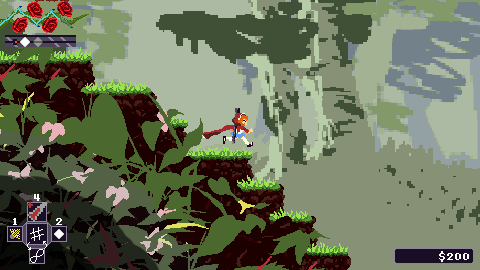
<style>
.page{position:relative;width:480px;height:270px}
.page>*{position:absolute;margin:0}
.t1{font:16px "8-Bit-Madness";color:#ffffff}
</style>
<div class="page">
<p class="t1" style="left:34px;top:194px;width:6px;height:7px">4</p>
<p class="t1" style="left:13px;top:218px;width:4px;height:7px">1</p>
<p class="t1" style="left:56px;top:218px;width:6px;height:7px">2</p>
<p class="t1" style="left:439px;top:251px;width:6px;height:11px">$</p>
</div>
